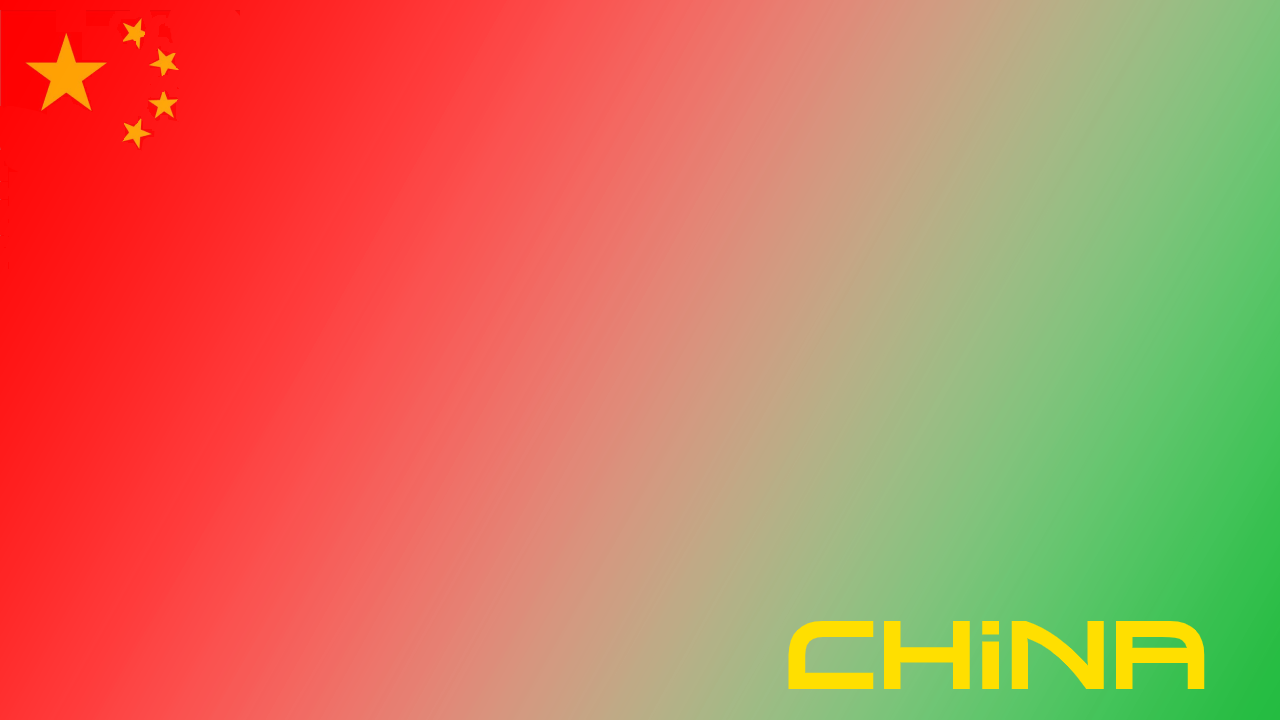
<style>
.page{position:relative;width:1280px;height:720px}
.page>*{position:absolute;margin:0}
.t1{font:90px "Xirod";color:#ffdf00}
</style>
<div class="page">
<p class="t1" style="left:788px;top:621px;width:417px;height:68px">China</p>
</div>
